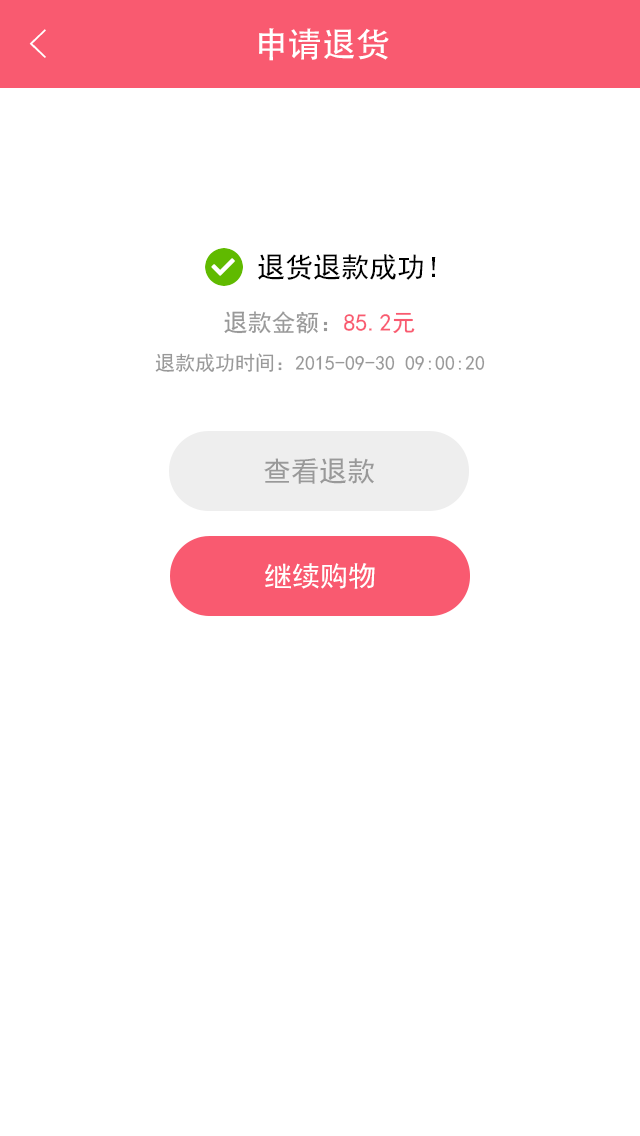
<style>
.page{position:relative;width:640px;height:1136px;background:#ffffff}
.page>*{position:absolute;margin:0}
.t1{font:40px "FZYXJW--GB1-0";color:#ffffff}
.t2{font:34px "AdobeHeitiStd-Regular";color:#ffffff}
.t3{font:28px "SimHei";color:#000000}
.t4{font:24px "SimHei";color:#999999}
.t5{font:24px "SimHei";color:#f95a70}
.t6{font:20px "SimHei";color:#999999}
.t7{font:28px "SimHei";color:#999999}
.t8{font:28px "SimHei";color:#ffffff}
</style>
<div class="page">
<p class="t1" style="left:29px;top:29px;width:17px;height:29px">&lt;</p>
<p class="t2" style="left:259px;top:28px;width:130px;height:33px">申请退货</p>
<p class="t3" style="left:258px;top:254px;width:178px;height:26px">退货退款成功！</p>
<p class="t4" style="left:224px;top:311px;width:191px;height:23px">退款金额：<span class="t5">85.2元</span></p>
<p class="t6" style="left:155px;top:353px;width:330px;height:19px">退款成功时间：2015-09-30 09:00:20</p>
<p class="t7" style="left:264px;top:458px;width:110px;height:26px">查看退款</p>
<p class="t8" style="left:265px;top:563px;width:110px;height:26px">继续购物</p>
</div>
